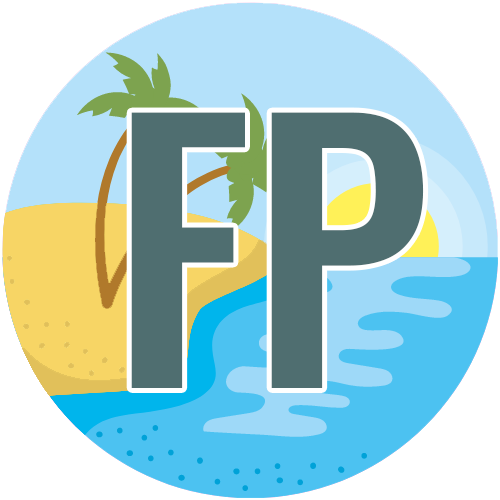
<style>
.page{position:relative;width:500px;height:500px;background:#ffffff}
.page>*{position:absolute;margin:0}
.t1{font:340px "Oswald-Medium";color:#4f6e70}
</style>
<div class="page">
<p class="t1" style="left:131px;top:112px;width:293px;height:276px">FP</p>
</div>
